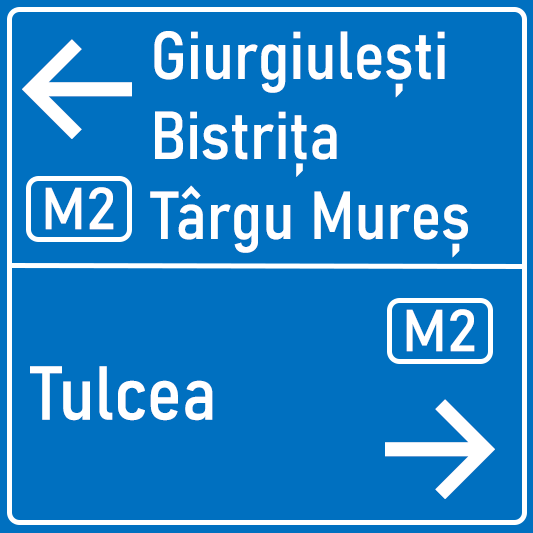
<style>
.page{position:relative;width:533px;height:533px;background:#0070c0}
.page>*{position:absolute;margin:0}
.t1{font:150px "Inter-Medium";color:#ffffff}
.t2{font:66.7px "Bahnschrift-SemiCondensed";color:#ffffff}
.t3{font:58.3px "Bahnschrift";color:#ffffff}
.t4{font:75px "Bahnschrift-SemiCondensed";color:#ffffff}
</style>
<div class="page">
<p class="t1" style="left:22px;top:39px;width:110px;height:100px">←</p>
<p class="t2" style="left:150px;top:31px;width:318px;height:227px">Giurgiulești<br>Bistrița<br>Târgu Mureș</p>
<p class="t3" style="left:45px;top:187px;width:69px;height:43px">M2</p>
<p class="t3" style="left:406px;top:309px;width:69px;height:43px">M2</p>
<p class="t4" style="left:30px;top:366px;width:183px;height:55px">Tulcea</p>
<p class="t1" style="left:385px;top:399px;width:110px;height:100px">→</p>
</div>
